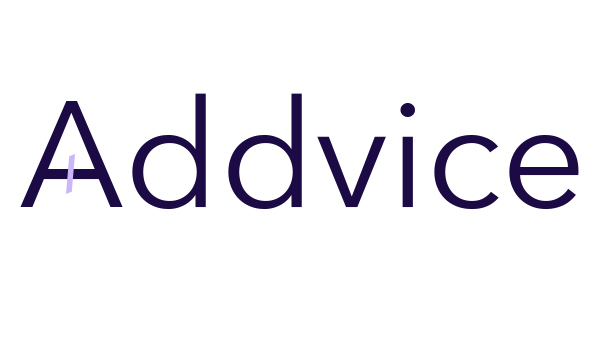
<style>
.page{position:relative;width:600px;height:350px;background:#ffffff}
.page>*{position:absolute;margin:0}
.t1{font:150px "AvenirNext-Regular";color:#1c0a44}
</style>
<div class="page">
<p class="t1" style="left:20px;top:93px;width:559px;height:116px">Addvice</p>
</div>
